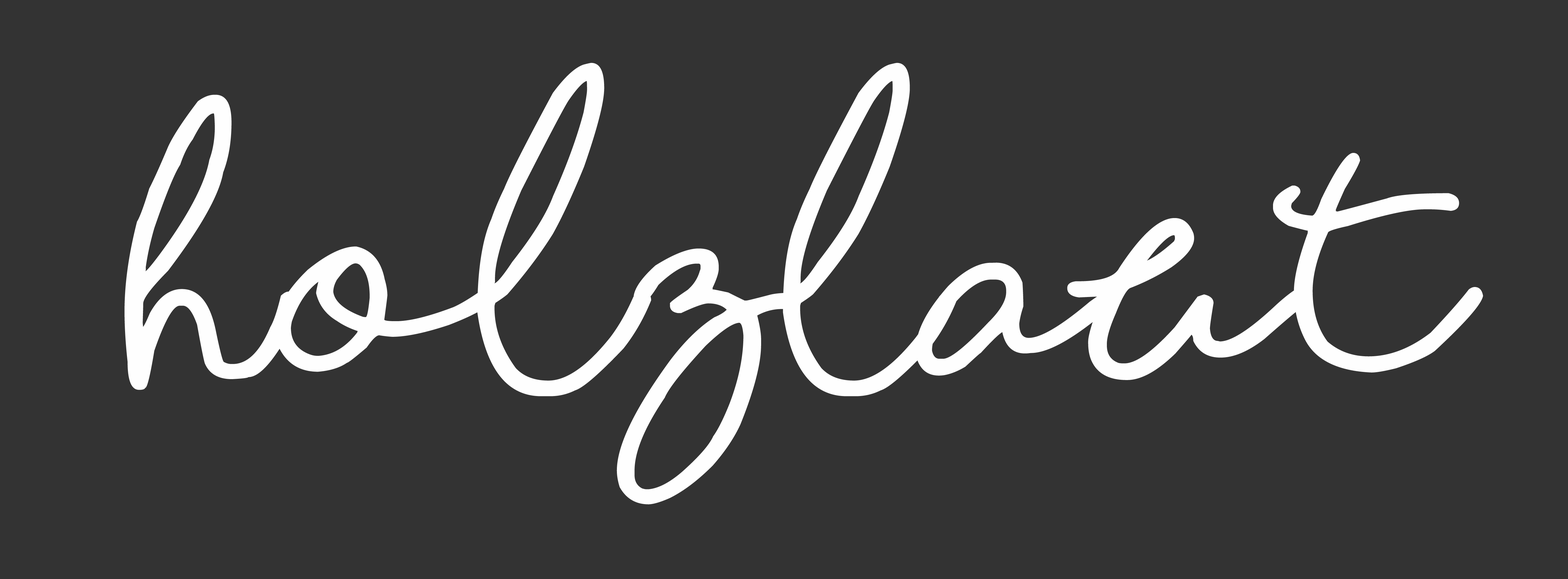
<style>
.page{position:relative;width:1568px;height:579px;background:#333333}
.page>*{position:absolute;margin:0}
.t1{font:261.2px "ShorelinesScriptBold";color:#fefefe}
</style>
<div class="page">
<p class="t1" style="left:124px;top:63px;width:1359px;height:442px">HOLZLAUT</p>
</div>
